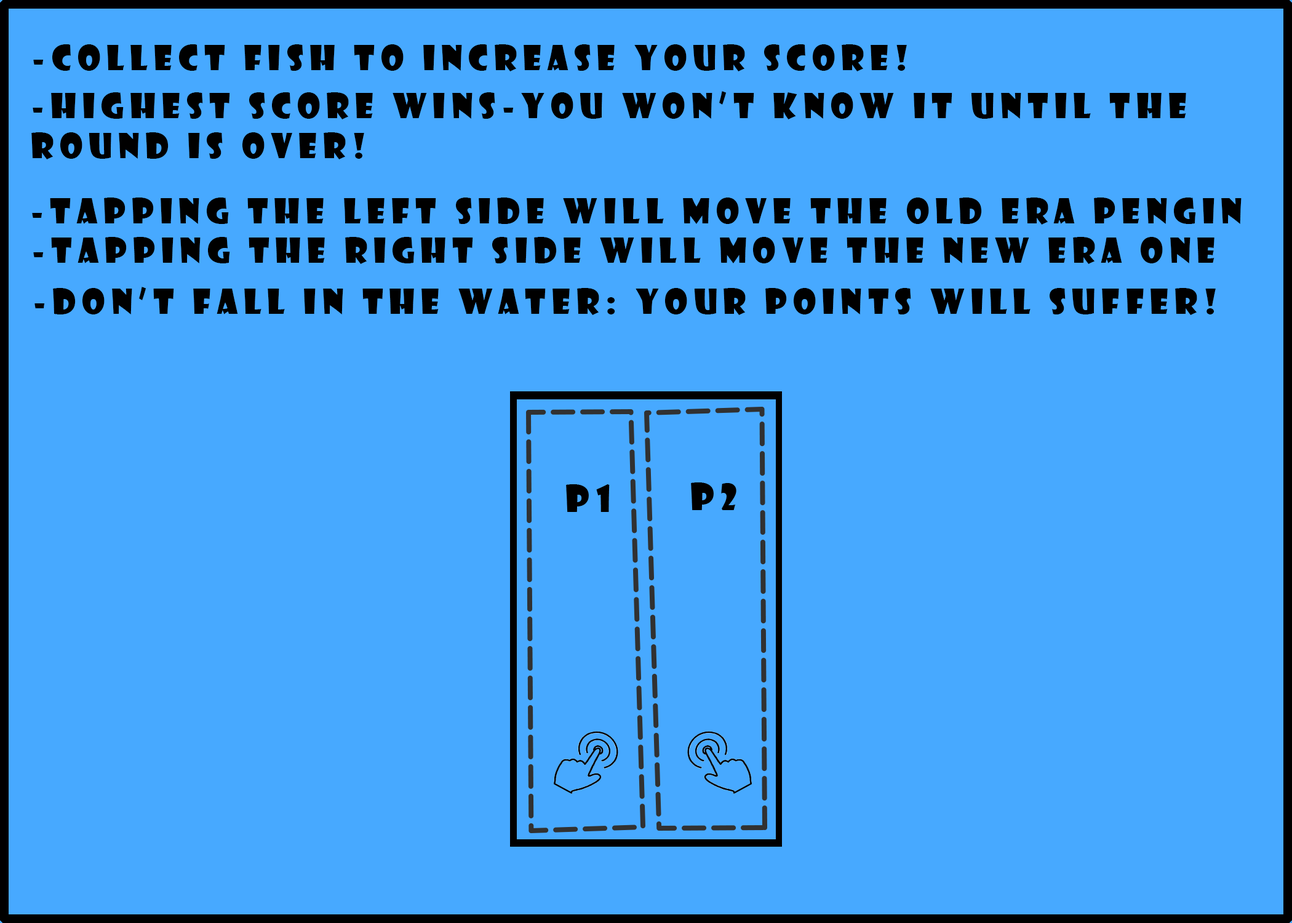
<style>
.page{position:relative;width:1292px;height:923px;background:#47a9ff}
.page>*{position:absolute;margin:0}
.t1{font:33.4px "ShowcardGothic-Reg";letter-spacing:0.18em;color:#000000}
</style>
<div class="page">
<p class="t1" style="left:33px;top:44px;width:874px;height:27px">-collect fish to increase your score!</p>
<p class="t1" style="left:31px;top:91px;width:1155px;height:68px">-Highest score wins-you won’t know it until the<br>round is over!</p>
<p class="t1" style="left:32px;top:197px;width:1210px;height:28px">-tapping the left side will move the old era pengin</p>
<p class="t1" style="left:33px;top:237px;width:1182px;height:27px">-tapping the right side will move the new era one</p>
<p class="t1" style="left:34px;top:287px;width:1182px;height:28px">-Don’t fall in the water: Your points will suffer!</p>
</div>
